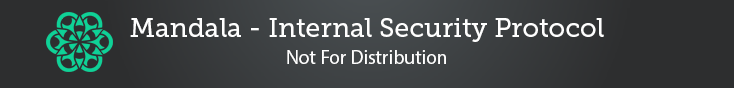
<style>
.page{position:relative;width:734px;height:88px;background:#2d2e2f}
.page>*{position:absolute;margin:0}
.t1{font:26.6px "MuseoSlab-500";color:#ffffff}
.t2{font:19.5px "MyriadPro-Regular";color:#ffffff}
</style>
<div class="page">
<p class="t1" style="left:130px;top:18px;width:474px;height:24px">Mandala - Internal Security Protocol</p>
<p class="t2" style="left:287px;top:50px;width:159px;height:14px">Not For Distribution</p>
</div>
